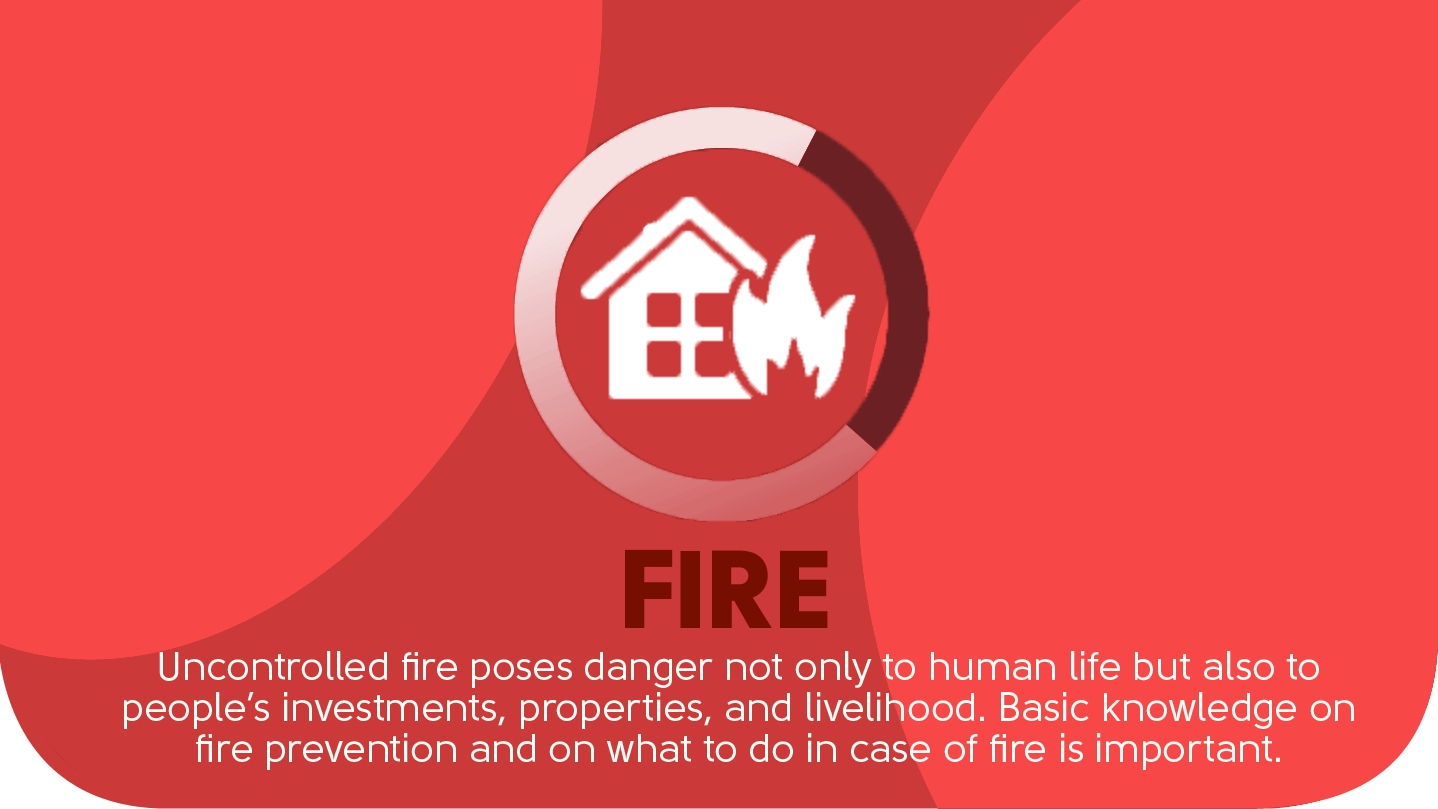
<style>
.page{position:relative;width:1438px;height:809px;background:#f74746}
.page>*{position:absolute;margin:0}
.t1{font:110px "Solomon-Sans-Black";color:#770f00}
.t2{font:40px/41px "Solomon-Sans-Normal";color:#fffef8}
</style>
<div class="page">
<p class="t1" style="left:625px;top:549px;width:203px;height:79px">FIRE</p>
<p class="t2" style="left:124px;top:651px;width:1230px;height:119px;text-align:center">Uncontrolled fire poses danger not only to human life but also to<br>people’s investments, properties, and livelihood. Basic knowledge on<br>fire prevention and on what to do in case of fire is important.</p>
</div>
